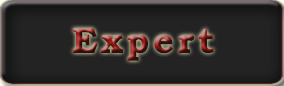
<style>
.page{position:relative;width:284px;height:86px;background:#232323}
.page>*{position:absolute;margin:0}
.t1{font:36px "BookmanOldStyle-Bold";letter-spacing:0.1em}
</style>
<div class="page">
<p class="t1" style="left:73px;top:28px;width:141px;height:33px">Expert</p>
</div>
